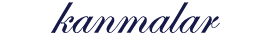
<style>
.page{position:relative;width:263px;height:44px;background:#ffffff}
.page>*{position:absolute;margin:0}
.t1{font:60px "EdwardianScriptITC";color:#171a48}
</style>
<div class="page">
<p class="t1" style="left:51px;top:2px;width:169px;height:31px">kanmalar</p>
</div>
